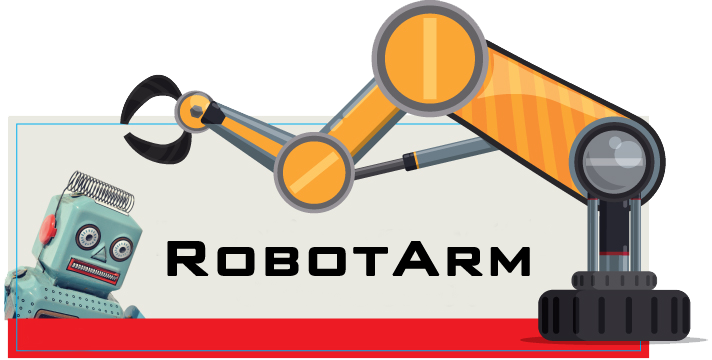
<style>
.page{position:relative;width:712px;height:360px;background:#ffffff}
.page>*{position:absolute;margin:0}
.t1{font:64px "BankGothicBT-Medium";color:#000000;font-weight:bold}
</style>
<div class="page">
<p class="t1" style="left:167px;top:241px;width:363px;height:35px">RobotArm</p>
</div>
